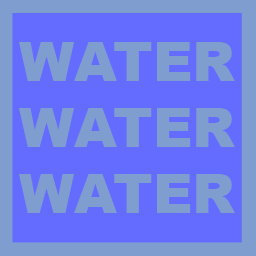
<style>
.page{position:relative;width:256px;height:256px;background:#646bff}
.page>*{position:absolute;margin:0}
.t1{font:55px "Arial-Black";color:#7f9dce}
</style>
<div class="page">
<p class="t1" style="left:19px;top:42px;width:216px;height:171px;text-align:center">WATER<br>WATER<br>WATER</p>
</div>
